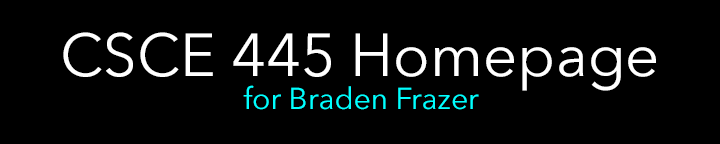
<style>
.page{position:relative;width:720px;height:144px;background:#000000}
.page>*{position:absolute;margin:0}
.t1{font:60px "AvenirNext-Regular";color:#ffffff}
.t2{font:30px "AvenirNext-Regular";color:#00ffff}
</style>
<div class="page">
<p class="t1" style="left:63px;top:32px;width:593px;height:59px">CSCE 445 Homepage</p>
<p class="t2" style="left:243px;top:85px;width:236px;height:25px">for Braden Frazer</p>
</div>
